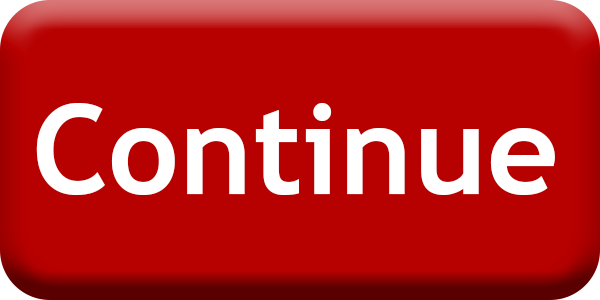
<style>
.page{position:relative;width:600px;height:300px;background:#b70000}
.page>*{position:absolute;margin:0}
.t1{font:125px "TrebuchetMS-Bold";color:#ffffff}
</style>
<div class="page">
<p class="t1" style="left:36px;top:103px;width:519px;height:92px">Continue</p>
</div>
